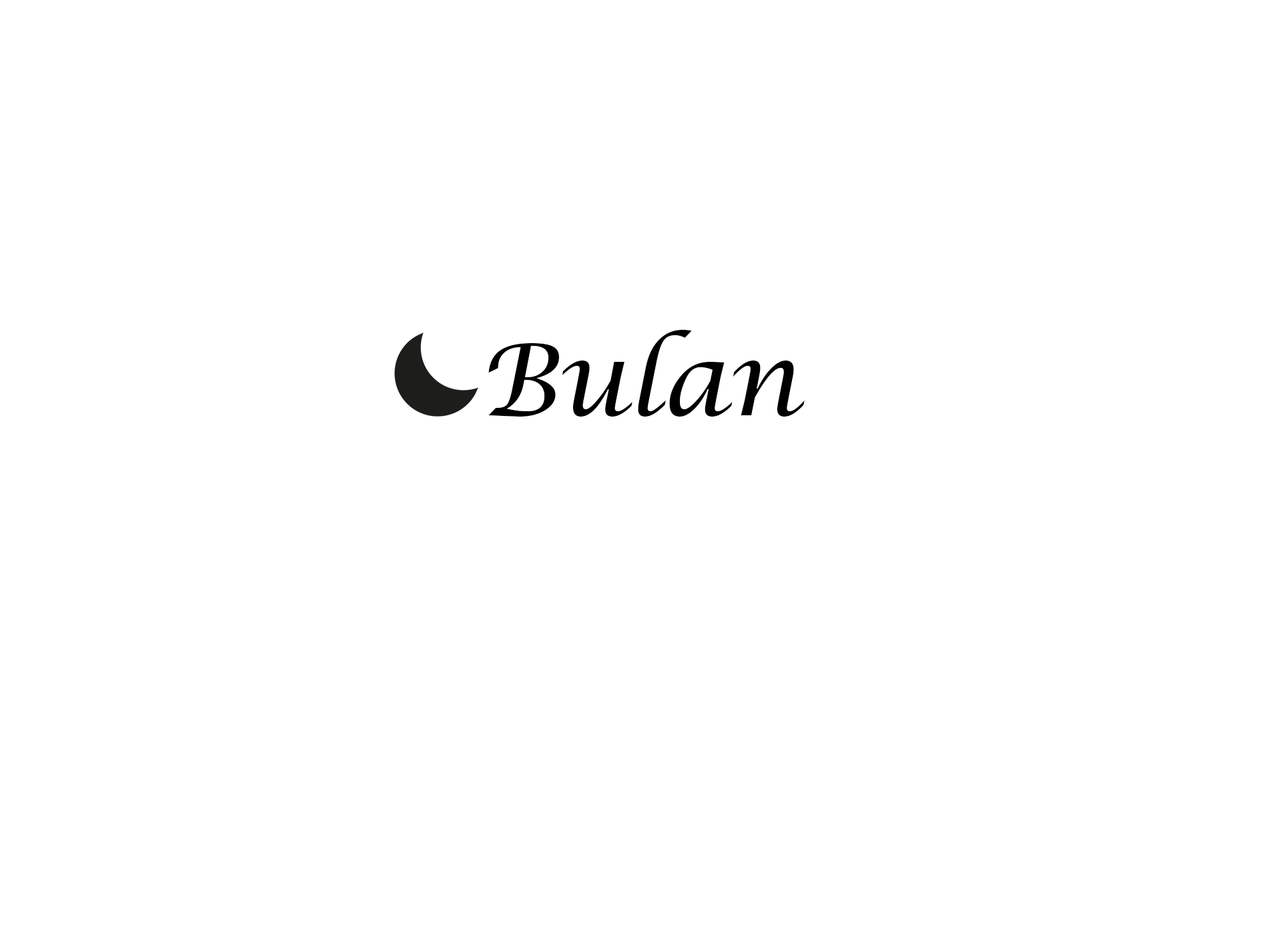
<style>
.page{position:relative;width:1261px;height:946px;background:#ffffff}
.page>*{position:absolute;margin:0}
.t1{font:100.1px "LucidaCalligraphy-Italic";color:#000000}
</style>
<div class="page">
<p class="t1" style="left:488px;top:330px;width:317px;height:86px">Bulan</p>
</div>
